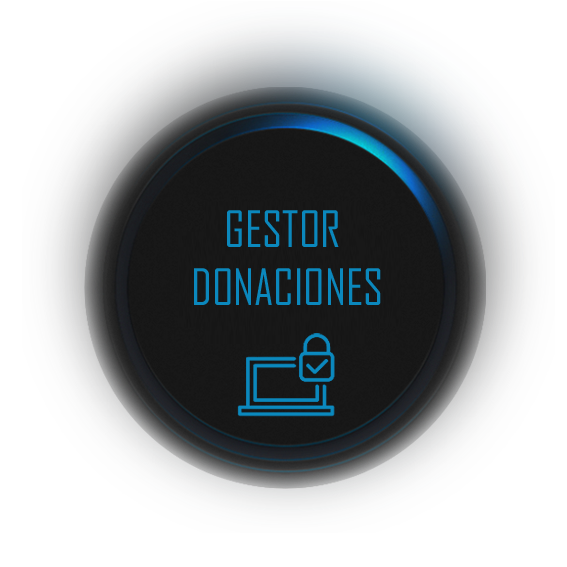
<style>
.page{position:relative;width:567px;height:567px;background:#ffffff}
.page>*{position:absolute;margin:0}
.t1{font:48px "AgencyFB-Reg";color:#0b88bd}
</style>
<div class="page">
<p class="t1" style="left:194px;top:210px;width:187px;height:95px;text-align:center">GESTOR <br>DONACIONES</p>
</div>
